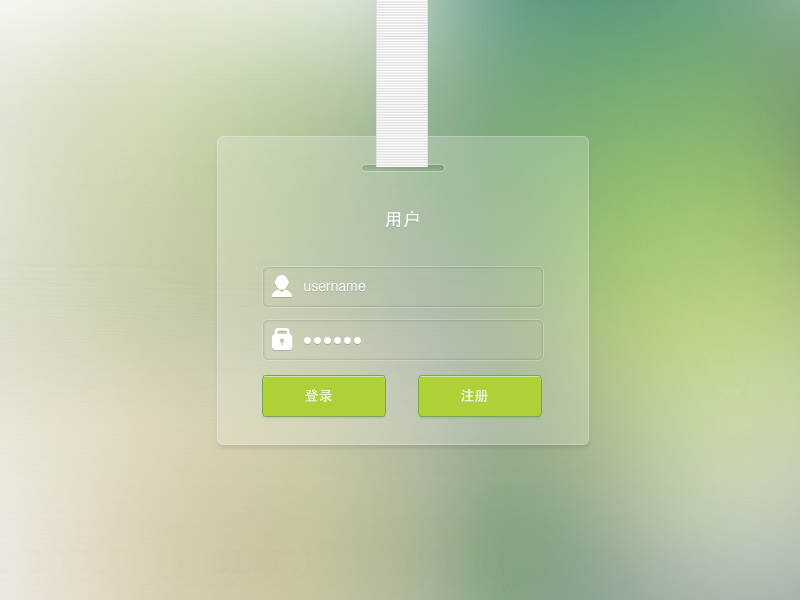
<style>
.page{position:relative;width:800px;height:600px}
.page>*{position:absolute;margin:0}
.t1{font:18px "AdobeHeitiStd-Regular";color:#ffffff}
.t2{font:14px "Helvetica";color:#ffffff}
.t3{font:14px "AdobeHeitiStd-Regular";color:#ffffff}
</style>
<div class="page">
<p class="t1" style="left:385px;top:210px;width:34px;height:18px">用户</p>
<p class="t2" style="left:304px;top:283px;width:62px;height:9px">username</p>
<p class="t3" style="left:305px;top:389px;width:27px;height:13px">登录</p>
<p class="t3" style="left:461px;top:389px;width:27px;height:13px">注册</p>
</div>
